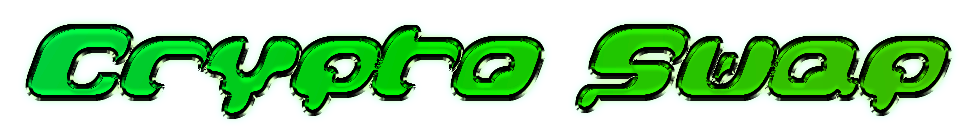
<style>
.page{position:relative;width:964px;height:138px;background:#ffffff}
.page>*{position:absolute;margin:0}
.t1{font:100px "GalaxyTail";letter-spacing:-0.075em}
</style>
<div class="page">
<p class="t1" style="left:28px;top:26px;width:921px;height:90px">Crypto Swap</p>
</div>
